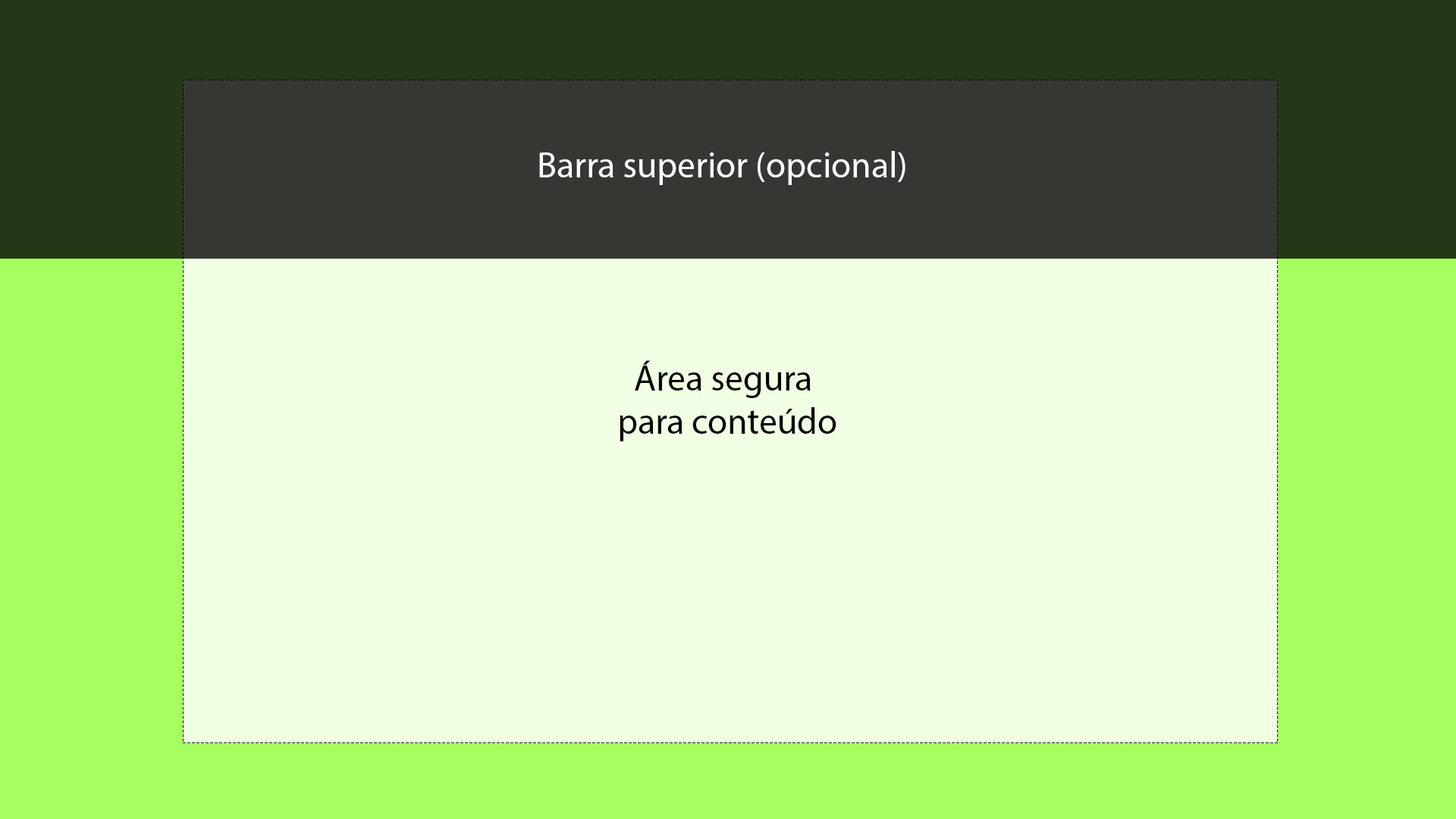
<style>
.page{position:relative;width:1456px;height:819px;background:#f1ffe5}
.page>*{position:absolute;margin:0}
.t1{font:36.4px "MyriadPro-Regular";color:#ffffff}
.t2{font:36.4px "MyriadPro-Regular";color:#000000}
</style>
<div class="page">
<p class="t1" style="left:539px;top:151px;width:366px;height:34px">Barra superior (opcional)</p>
<p class="t2" style="left:620px;top:360px;width:216px;height:81px;text-align:center">Área segura <br>para conteúdo</p>
</div>
